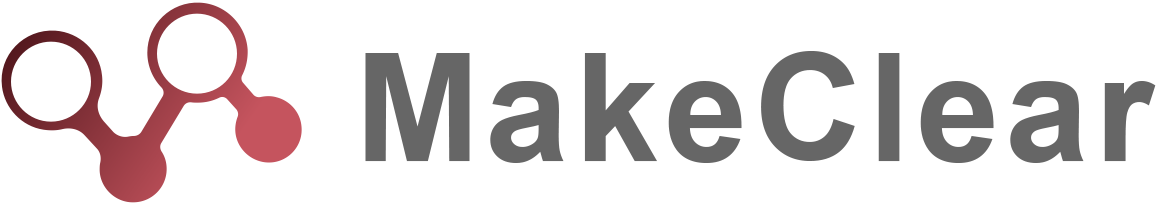
<style>
.page{position:relative;width:1158px;height:206px;background:#ffffff}
.page>*{position:absolute;margin:0}
.t1{font:150px "Arial-BoldMT";letter-spacing:0.04em;color:#666666}
</style>
<div class="page">
<p class="t1" style="left:365px;top:51px;width:791px;height:112px">MakeClear</p>
</div>
